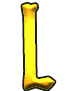
<style>
.page{position:relative;width:77px;height:91px;background:#ffffff}
.page>*{position:absolute;margin:0}
.t1{font:111.2px "Martel";letter-spacing:0.075em;scale:0.77 1}
</style>
<div class="page">
<p class="t1" style="left:22px;top:3px;width:33px;height:87px">L</p>
<p class="t1" style="left:22px;top:3px;width:33px;height:87px">L</p>
</div>
